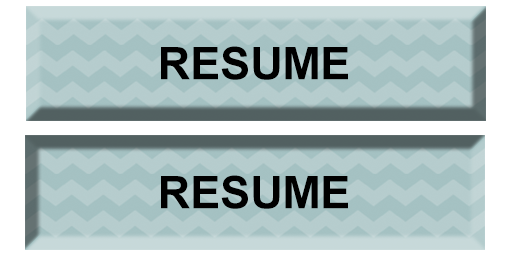
<style>
.page{position:relative;width:512px;height:256px}
.page>*{position:absolute;margin:0}
.t1{font:45px "Arial-BoldMT";color:#000000}
</style>
<div class="page">
<p class="t1" style="left:161px;top:46px;width:187px;height:34px">RESUME</p>
<p class="t1" style="left:161px;top:175px;width:187px;height:34px">RESUME</p>
</div>
